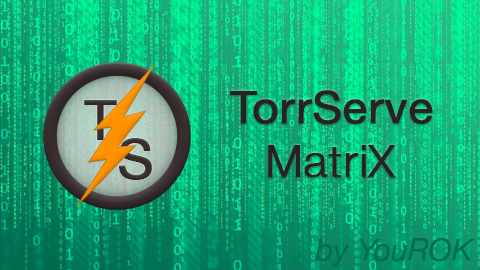
<style>
.page{position:relative;width:480px;height:270px}
.page>*{position:absolute;margin:0}
.t1{font:45px "HelveticaNeue";color:#2a2122;font-weight:bold}
.t2{font:45px "HelveticaNeue-Light";color:#2a2122;font-weight:bold}
.t3{font:30px "HelveticaNeue-LightItalic";color:#006e51;font-weight:bold}
</style>
<div class="page">
<p class="t1" style="left:230px;top:90px;width:203px;height:35px">TorrServe</p>
<p class="t2" style="left:268px;top:145px;width:128px;height:33px">MatriX</p>
<p class="t3" style="left:315px;top:238px;width:159px;height:29px">by YouROK</p>
</div>
